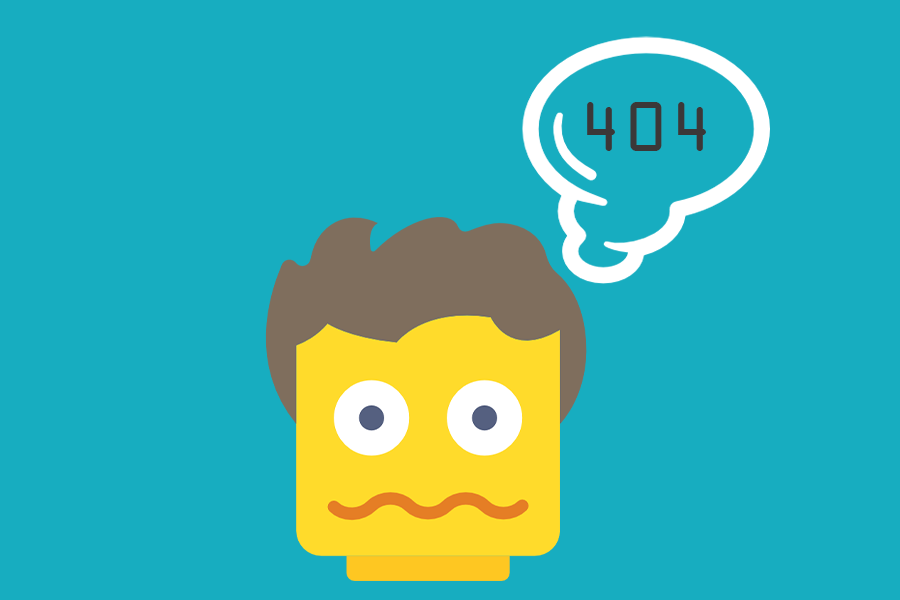
<style>
.page{position:relative;width:900px;height:600px;background:#17adc0}
.page>*{position:absolute;margin:0}
.t1{font:75px "OCRAExtended";color:#3b3838}
</style>
<div class="page">
<p class="t1" style="left:587px;top:102px;width:119px;height:49px">404</p>
</div>
